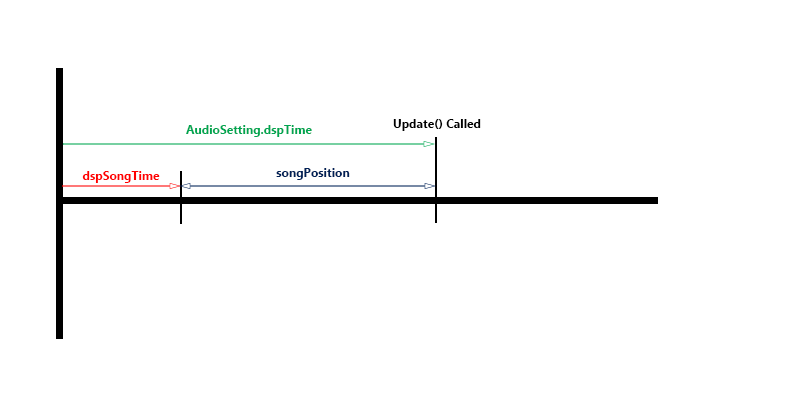
<style>
.page{position:relative;width:800px;height:400px;background:#ffffff}
.page>*{position:absolute;margin:0}
.t1{font:12px "MicrosoftTaiLe-Bold";color:#00a651}
.t2{font:12px "MicrosoftTaiLe-Bold";color:#000000}
.t3{font:12px "MicrosoftTaiLe-Bold";color:#ff0000}
.t4{font:12px "MicrosoftTaiLe-Bold";color:#002157}
</style>
<div class="page">
<p class="t1" style="left:186px;top:125px;width:126px;height:12px">AudioSetting.dspTime</p>
<p class="t2" style="left:393px;top:119px;width:88px;height:12px">Update() Called</p>
<p class="t3" style="left:82px;top:171px;width:78px;height:12px">dspSongTime</p>
<p class="t4" style="left:276px;top:168px;width:74px;height:12px">songPosition</p>
</div>
